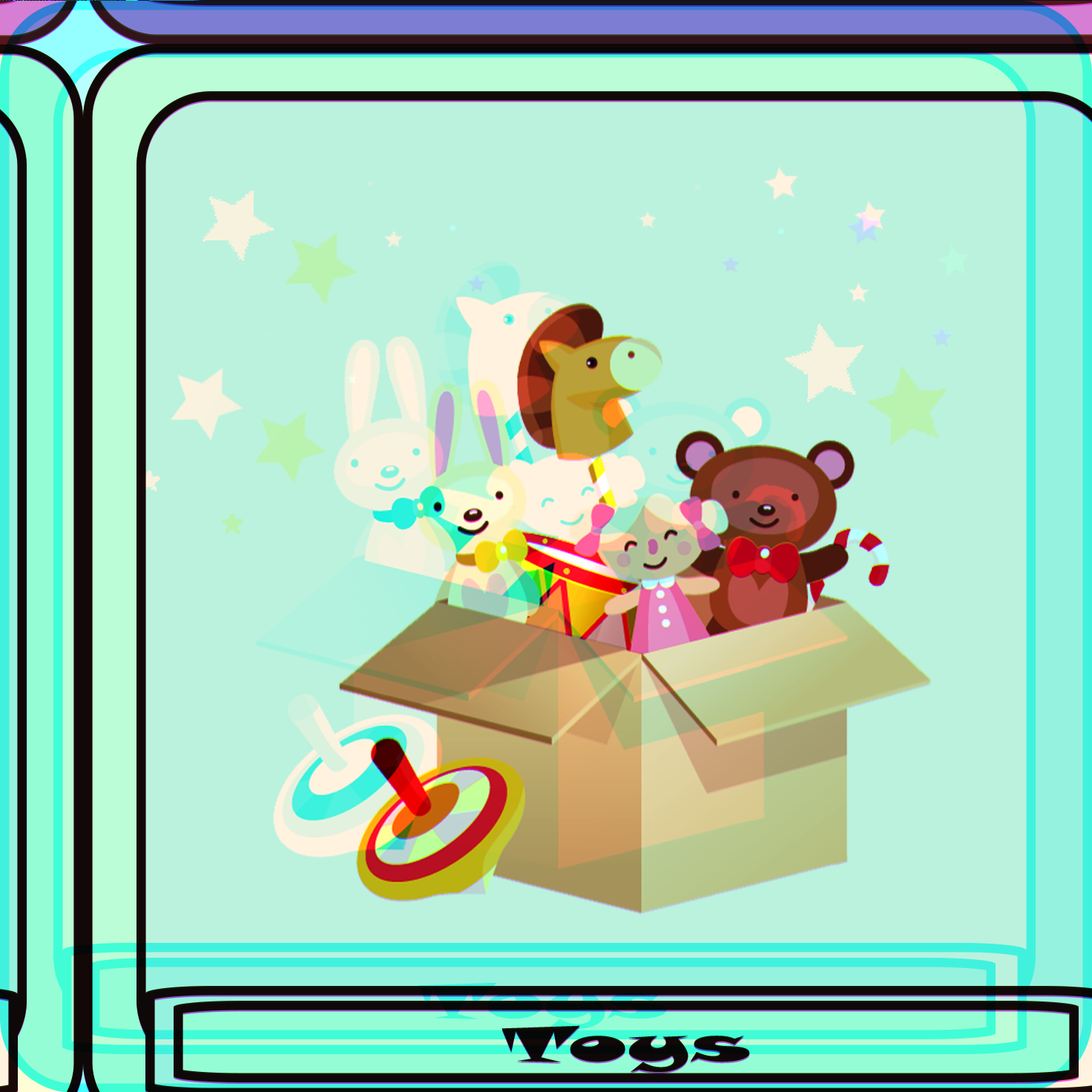
<style>
.page{position:relative;width:1092px;height:1092px;background:#baf2de}
.page>*{position:absolute;margin:0}
.t1{font:48.2px "SnapITC-Regular";scale:2 1}
</style>
<div class="page">
<p class="t1" style="left:418px;top:981px;width:249px;height:48px">Toys</p>
</div>
